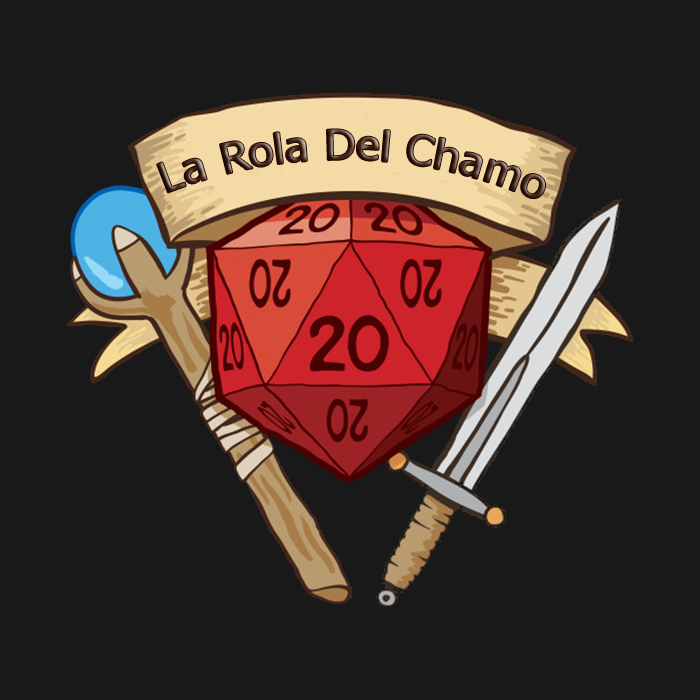
<style>
.page{position:relative;width:700px;height:700px;background:#191919}
.page>*{position:absolute;margin:0}
.t1{font:41.6px "Tahoma"}
</style>
<div class="page">
<p class="t1" style="left:157px;top:129px;width:388px;height:69px;rotate:1deg">La Rola Del Chamo</p>
</div>
